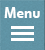
<style>
.page{position:relative;width:45px;height:50px}
.page>*{position:absolute;margin:0}
.t1{font:15px "EvoBQ-Medium";color:#ffffff}
</style>
<div class="page">
<p class="t1" style="left:4px;top:7px;width:36px;height:11px">Menu</p>
</div>
